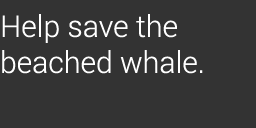
<style>
.page{position:relative;width:256px;height:128px;background:#333333}
.page>*{position:absolute;margin:0}
.t1{font:30px "Roboto-Light";color:#ffffff}
</style>
<div class="page">
<p class="t1" style="left:2px;top:14px;width:201px;height:60px">Help save the beached whale.</p>
</div>
